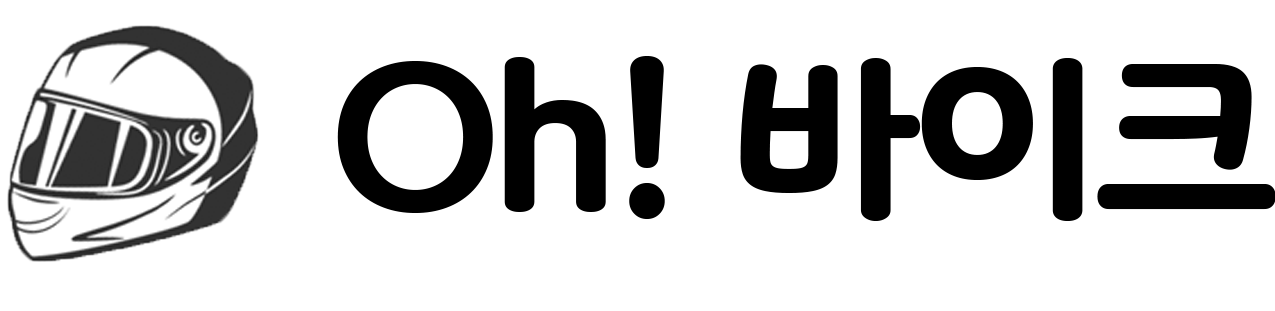
<style>
.page{position:relative;width:1275px;height:311px;background:#ffffff}
.page>*{position:absolute;margin:0}
.t1{font:196.9px "Binggrae-Bold";letter-spacing:-0.06em;color:#000000}
</style>
<div class="page">
<p class="t1" style="left:337px;top:56px;width:939px;height:165px">Oh! 바이크</p>
</div>
